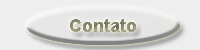
<style>
.page{position:relative;width:200px;height:50px;background:#eeeeee}
.page>*{position:absolute;margin:0}
.t1{font:18px "Arial-BoldMT";color:#8f8e75}
</style>
<div class="page">
<p class="t1" style="left:70px;top:19px;width:66px;height:13px">Contato</p>
</div>
